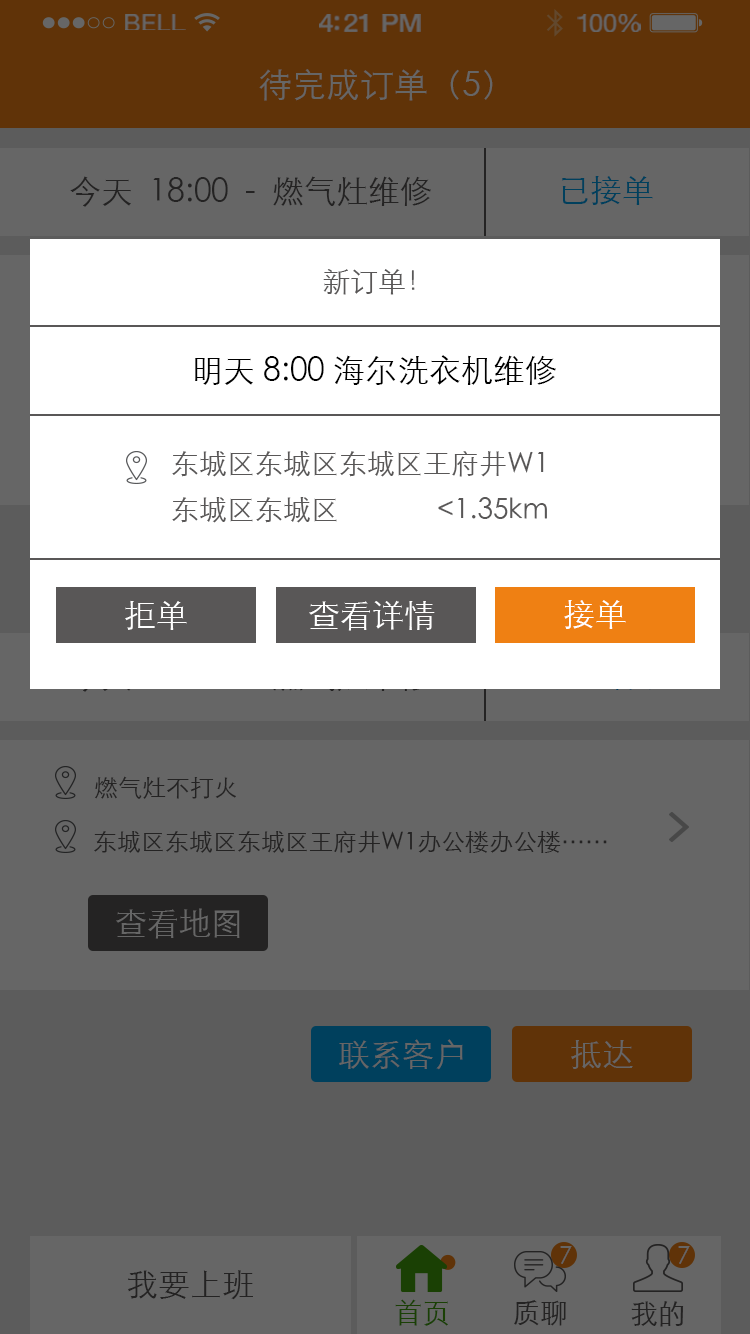
<style>
.page{position:relative;width:750px;height:1334px;background:#666666}
.page>*{position:absolute;margin:0}
.t1{font:23.3px "HelveticaNeue";letter-spacing:0.02em;color:#666666;scale:1.06 1}
.t2{font:25.3px "HelveticaNeue-Medium";letter-spacing:-0.02em;color:#666666;scale:1.06 1}
.t3{font:24.3px "HelveticaNeue";letter-spacing:-0.02em;color:#666666;scale:1.06 1}
.t4{font:34px "STXihei";color:#666666}
.t5{font:32px "STXihei";color:#242323}
.t6{font:32px "STXihei";color:#00405d}
.t7{font:28px "STXihei";color:#595757}
.t8{font:32px "STXihei";color:#000000}
.t9{font:28px/46px "STXihei";color:#595757}
.t10{font:32px "STXihei";color:#ffffff}
.t11{font:24px "STXihei";color:#242323}
.t12{font:32px "STXihei";color:#666666}
.t13{font:24px "STXihei";color:#666666}
.t14{font:28px "STXihei";color:#1a4004}
.t15{font:28px "STXihei";color:#242323}
</style>
<div class="page">
<p class="t1" style="left:125px;top:14px;width:61px;height:16px">BELL</p>
<p class="t2" style="left:319px;top:14px;width:102px;height:18px">4:21 PM</p>
<p class="t3" style="left:577px;top:14px;width:64px;height:18px">100%</p>
<p class="t4" style="left:259px;top:69px;width:234px;height:32px">待完成订单（5）</p>
<p class="t5" style="left:70px;top:176px;width:361px;height:31px">今天  18:00  -  燃气灶维修</p>
<p class="t6" style="left:562px;top:176px;width:91px;height:29px">已接单</p>
<p class="t7" style="left:323px;top:269px;width:92px;height:26px">新订单！</p>
<p class="t8" style="left:195px;top:355px;width:361px;height:30px">明天 8:00 海尔洗衣机维修</p>
<p class="t9" style="left:172px;top:451px;width:375px;height:72px">东城区东城区东城区王府井W1<br>东城区东城区              &lt;1.35km</p>
<p class="t10" style="left:125px;top:600px;width:62px;height:30px">拒单</p>
<p class="t10" style="left:309px;top:600px;width:126px;height:31px">查看详情</p>
<p class="t10" style="left:564px;top:600px;width:62px;height:29px">接单</p>
<p class="t11" style="left:95px;top:776px;width:141px;height:23px">燃气灶不打火</p>
<p class="t11" style="left:94px;top:830px;width:513px;height:23px">东城区东城区东城区王府井W1办公楼办公楼……</p>
<p class="t12" style="left:116px;top:908px;width:124px;height:31px">查看地图</p>
<p class="t12" style="left:339px;top:1039px;width:124px;height:31px">联系客户</p>
<p class="t12" style="left:571px;top:1040px;width:62px;height:29px">抵达</p>
<p class="t13" style="left:560px;top:1246px;width:12px;height:18px">7</p>
<p class="t13" style="left:678px;top:1246px;width:12px;height:18px">7</p>
<p class="t5" style="left:128px;top:1270px;width:125px;height:30px">我要上班</p>
<p class="t14" style="left:395px;top:1299px;width:53px;height:27px">首页</p>
<p class="t15" style="left:514px;top:1300px;width:52px;height:26px">质聊</p>
<p class="t15" style="left:631px;top:1301px;width:53px;height:26px">我的</p>
</div>
